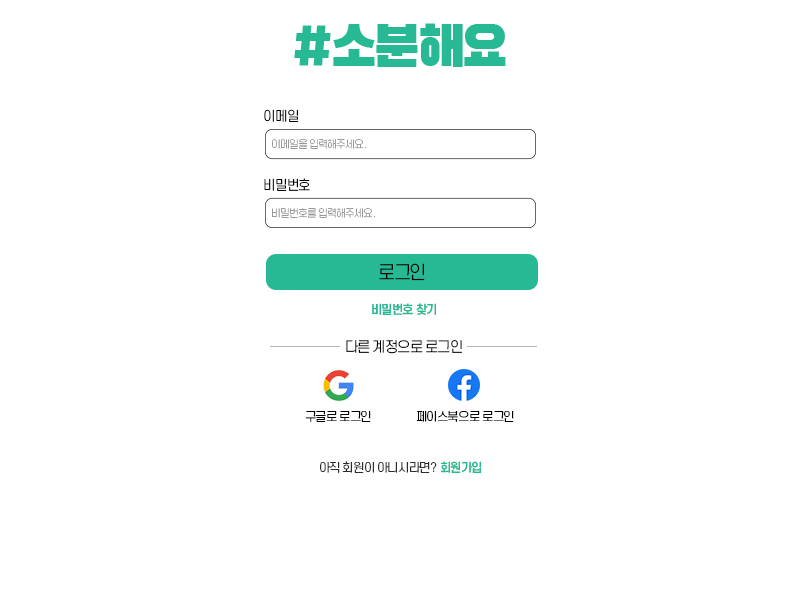
<style>
.page{position:relative;width:800px;height:600px;background:#ffffff}
.page>*{position:absolute;margin:0}
.t1{font:13.2px "S-CoreDream-3Light";letter-spacing:-0.075em;color:#000000}
.t2{font:10.3px "S-CoreDream-2ExtraLight";letter-spacing:-0.075em;color:#999999}
.t3{font:18px "S-CoreDream-3Light";letter-spacing:-0.075em;color:#000000}
.t4{font:12px "S-CoreDream-6Bold";letter-spacing:-0.075em;color:#27b994}
.t5{font:14px "S-CoreDream-3Light";letter-spacing:-0.075em;color:#000000}
.t6{font:12px "S-CoreDream-3Light";letter-spacing:-0.075em;color:#000000}
.t7{font:12px "S-CoreDream-3Light";letter-spacing:-0.075em;color:#2e2b2b}
</style>
<div class="page">
<p class="t1" style="left:264px;top:109px;width:35px;height:13px">이메일</p>
<p class="t2" style="left:272px;top:139px;width:94px;height:10px">이메일을 입력해주세요.</p>
<p class="t1" style="left:264px;top:178px;width:46px;height:13px">비밀번호</p>
<p class="t2" style="left:272px;top:208px;width:104px;height:10px">비밀번호를 입력해주세요.</p>
<p class="t3" style="left:379px;top:263px;width:46px;height:18px">로그인</p>
<p class="t4" style="left:372px;top:303px;width:64px;height:12px">비밀번호 찾기</p>
<p class="t5" style="left:346px;top:340px;width:116px;height:14px">다른 계정으로 로그인</p>
<p class="t6" style="left:305px;top:411px;width:66px;height:11px">구글로 로그인</p>
<p class="t6" style="left:416px;top:411px;width:98px;height:11px">페이스북으로 로그인</p>
<p class="t7" style="left:320px;top:461px;width:117px;height:12px">아직 회원이 아니시라면?</p>
<p class="t4" style="left:441px;top:461px;width:40px;height:12px">회원가입</p>
</div>
